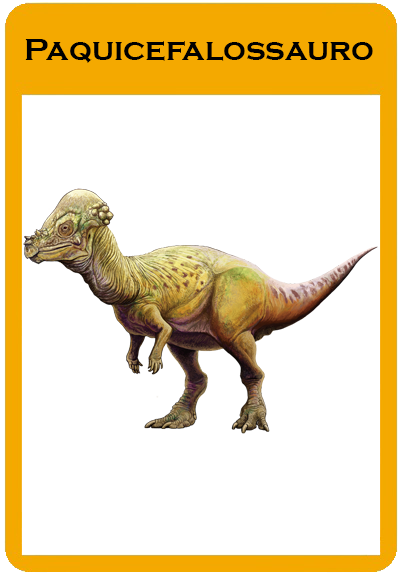
<style>
.page{position:relative;width:400px;height:575px;background:#ffffff}
.page>*{position:absolute;margin:0}
.t1{font:32px "CopperplateGothic-Bold";color:#000000}
</style>
<div class="page">
<p class="t1" style="left:25px;top:39px;width:348px;height:24px">Paquicefalossauro</p>
</div>
